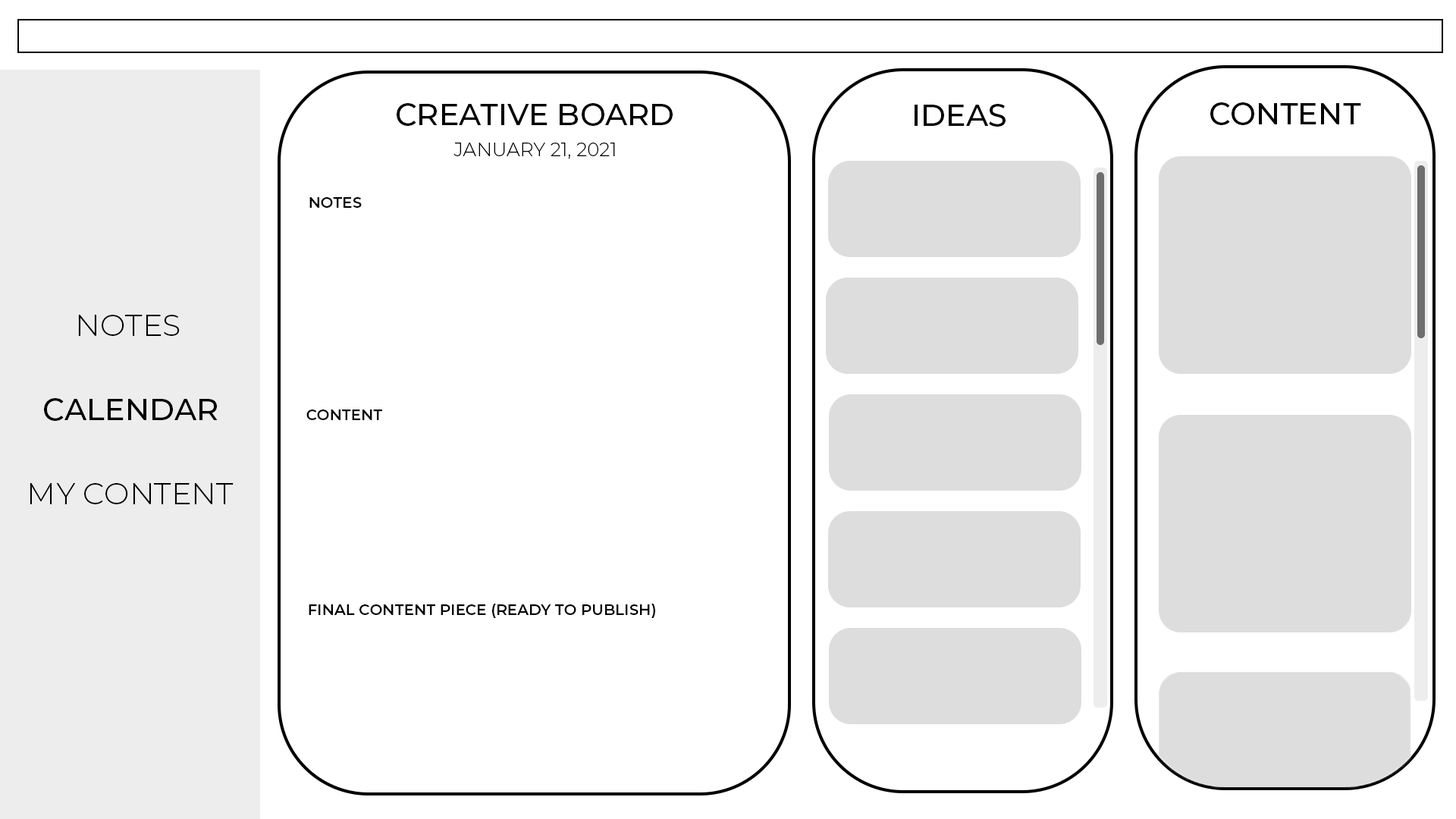
<style>
.page{position:relative;width:1456px;height:819px;background:#ffffff}
.page>*{position:absolute;margin:0}
.t1{font:30.3px "Montserrat-Medium";color:#000000}
.t2{font:19px "Montserrat-Light";color:#000000}
.t3{font:15.2px "Montserrat-SemiBold";color:#000000}
.t4{font:30.3px "Montserrat-Light";color:#000000}
</style>
<div class="page">
<p class="t1" style="left:397px;top:103px;width:276px;height:23px">CREATIVE BOARD</p>
<p class="t1" style="left:915px;top:104px;width:91px;height:23px">IDEAS</p>
<p class="t1" style="left:1210px;top:102px;width:151px;height:23px">CONTENT</p>
<p class="t2" style="left:453px;top:143px;width:162px;height:16px">JANUARY 21, 2021</p>
<p class="t3" style="left:309px;top:197px;width:53px;height:11px">NOTES</p>
<p class="t4" style="left:78px;top:315px;width:102px;height:21px">NOTES</p>
<p class="t1" style="left:44px;top:398px;width:174px;height:23px">CALENDAR</p>
<p class="t3" style="left:306px;top:409px;width:76px;height:11px">CONTENT</p>
<p class="t4" style="left:30px;top:483px;width:204px;height:21px">MY CONTENT</p>
<p class="t3" style="left:309px;top:604px;width:346px;height:14px">FINAL CONTENT PIECE (READY TO PUBLISH)</p>
</div>
